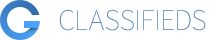
<style>
.page{position:relative;width:220px;height:40px;background:#ffffff}
.page>*{position:absolute;margin:0}
.t1{font:30px "SourceSansPro-ExtraLight";color:#5284bd;text-transform:uppercase}
</style>
<div class="page">
<p class="t1" style="left:59px;top:9px;width:147px;height:22px">CLASSIFIEDS</p>
</div>
